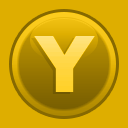
<style>
.page{position:relative;width:128px;height:128px;background:#deae00}
.page>*{position:absolute;margin:0}
.t1{font:78px "Arial-Black"}
</style>
<div class="page">
<p class="t1" style="left:34px;top:36px;width:61px;height:56px">Y</p>
</div>
